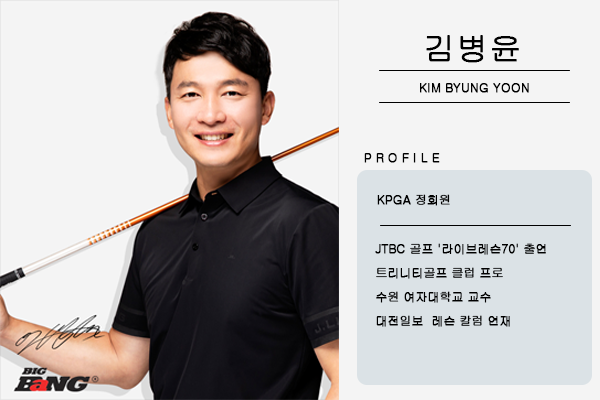
<style>
.page{position:relative;width:600px;height:400px;background:#f4f4f4}
.page>*{position:absolute;margin:0}
.t1{font:32px "Gulim";color:#000000;font-weight:bold}
.t2{font:12px "Gulim";color:#000000;font-weight:bold}
.t3{font:12px/24px "Gulim";color:#000000;font-weight:bold}
</style>
<div class="page">
<p class="t1" style="left:426px;top:35px;width:93px;height:28px">김병윤</p>
<p class="t2" style="left:420px;top:83px;width:109px;height:10px">KIM BYUNG YOON</p>
<p class="t2" style="left:364px;top:153px;width:76px;height:10px">P R O F I L E</p>
<p class="t2" style="left:377px;top:194px;width:73px;height:12px">KPGA 정회원</p>
<p class="t3" style="left:375px;top:243px;width:171px;height:84px">JTBC 골프 '라이브레슨70' 출연<br>트리니티골프 클럽 프로<br>수원 여자대학교 교수<br>대전일보  레슨 칼럼 연재</p>
</div>
